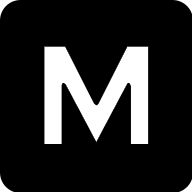
<style>
.page{position:relative;width:192px;height:192px;background:#000000}
.page>*{position:absolute;margin:0}
.t1{font:150px "NeutronsDemoRegular";letter-spacing:0.1em;color:#ffffff}
</style>
<div class="page">
<p class="t1" style="left:42px;top:44px;width:109px;height:102px">M</p>
</div>
